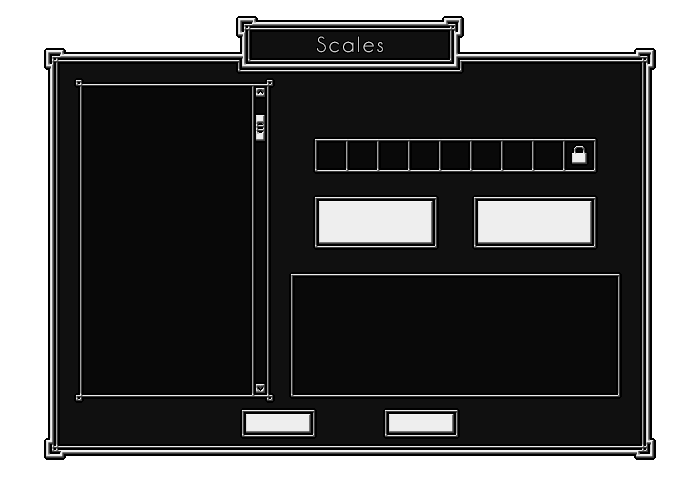
<style>
.page{position:relative;width:700px;height:500px;background:#ffffff}
.page>*{position:absolute;margin:0}
.t1{font:22px "Champagne&Limousines";letter-spacing:0.12em;color:#eeeeee}
</style>
<div class="page">
<p class="t1" style="left:317px;top:36px;width:66px;height:17px">Scales</p>
</div>
